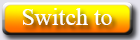
<style>
.page{position:relative;width:140px;height:40px}
.page>*{position:absolute;margin:0}
.t1{font:24px "TimesNewRomanPSMT";color:#ffffff}
</style>
<div class="page">
<p class="t1" style="left:22px;top:8px;width:90px;height:17px">Switch to</p>
</div>
